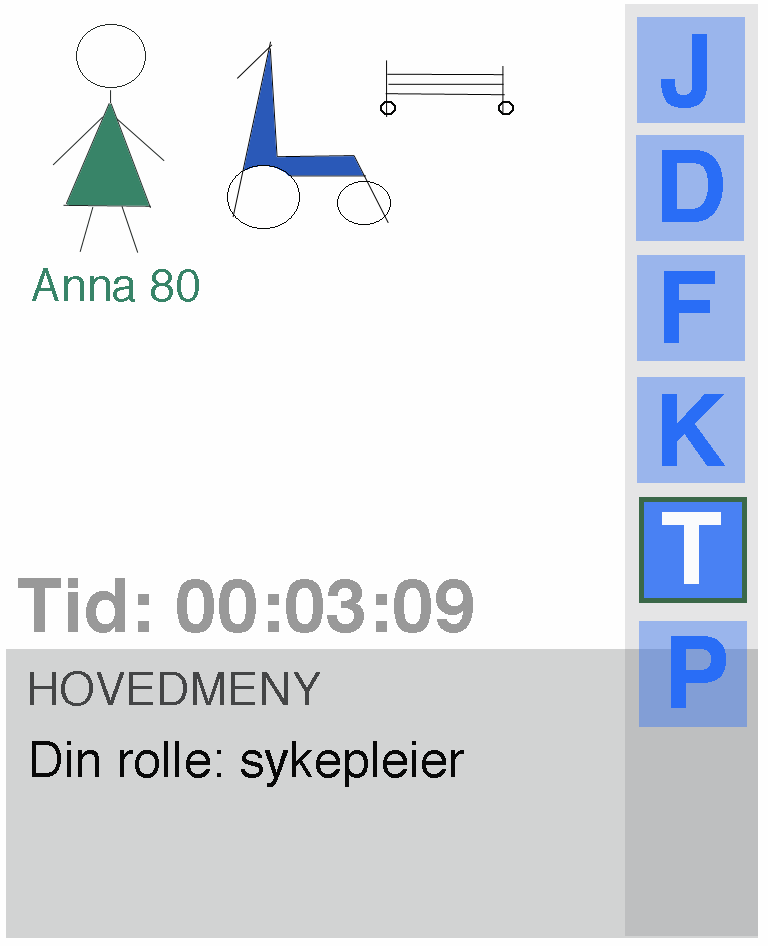
<style>
.page{position:relative;width:768px;height:946px;background:#fefefe}
.page>*{position:absolute;margin:0}
.t1{font:100px "Helvetica-Bold";color:#296df6}
.t2{font:45.8px "Helvetica";color:#388468}
.t3{font:100px "Helvetica-Bold";color:#fafbfd}
.t4{font:75px "Helvetica-Bold";color:#999999}
.t5{font:45.8px "Helvetica";color:#444546}
.t6{font:50px "Helvetica";color:#080808}
</style>
<div class="page">
<p class="t1" style="left:662px;top:150px;width:61px;height:72px">D</p>
<p class="t2" style="left:32px;top:268px;width:167px;height:34px">Anna 80</p>
<p class="t1" style="left:664px;top:271px;width:51px;height:72px">F</p>
<p class="t1" style="left:662px;top:394px;width:63px;height:72px">K</p>
<p class="t3" style="left:662px;top:512px;width:59px;height:72px">T</p>
<p class="t4" style="left:18px;top:578px;width:455px;height:55px">Tid: 00:03:09</p>
<p class="t1" style="left:671px;top:636px;width:55px;height:72px">P</p>
<p class="t5" style="left:30px;top:671px;width:290px;height:35px">HOVEDMENY</p>
<p class="t6" style="left:32px;top:741px;width:432px;height:46px">Din rolle: sykepleier</p>
</div>
